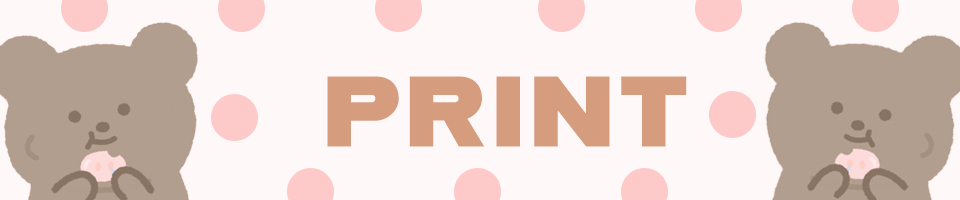
<style>
.page{position:relative;width:960px;height:200px;background:#fff8f8}
.page>*{position:absolute;margin:0}
.t1{font:100px "Alfarn";letter-spacing:0.05em;color:#d59c7e}
</style>
<div class="page">
<p class="t1" style="left:327px;top:76px;width:360px;height:71px">PRINT</p>
</div>
